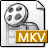
<style>
.page{position:relative;width:48px;height:48px}
.page>*{position:absolute;margin:0}
.t1{font:14px "EstrangeloEdessa";color:#ffffff}
</style>
<div class="page">
<p class="t1" style="left:18px;top:32px;width:28px;height:10px">MKV</p>
</div>
